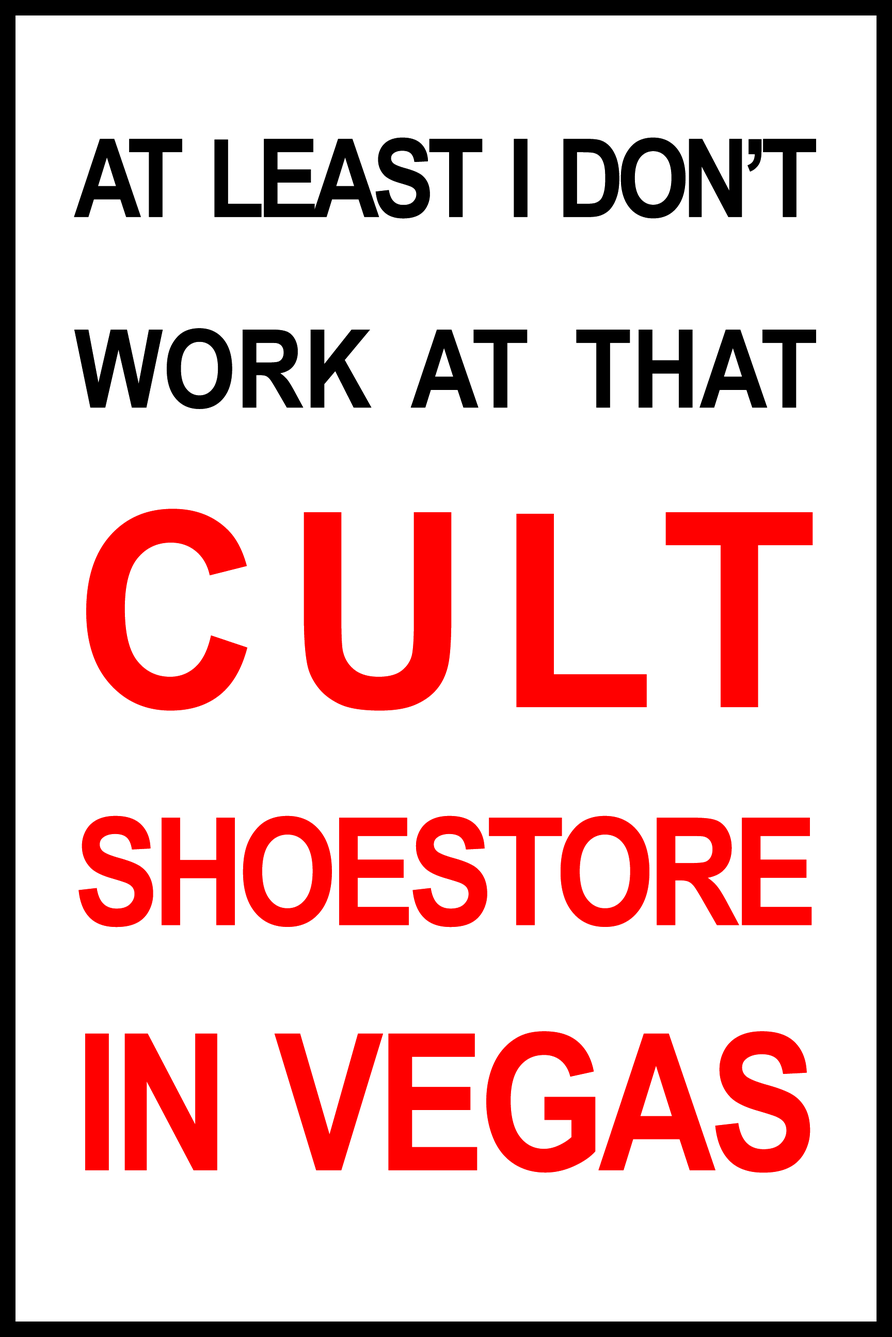
<style>
.page{position:relative;width:892px;height:1337px;background:#ffffff}
.page>*{position:absolute;margin:0}
.t1{font:109px/190.7px "Arial-BoldMT";letter-spacing:-0.075em;color:#000000;text-transform:uppercase;scale:0.85 1}
.t2{font:109px/190.7px "Arial-BoldMT";color:#000000;text-transform:uppercase;scale:0.86 1}
.t3{font:272.4px/299.7px "Arial-BoldMT";letter-spacing:0.05em;color:#ff0000;text-transform:uppercase;scale:0.95 1}
.t4{font:149.8px/217.9px "Arial-BoldMT";letter-spacing:-0.075em;color:#ff0000;text-transform:uppercase;scale:0.85 1}
.t5{font:190.7px/245.2px "Arial-BoldMT";letter-spacing:-0.04em;color:#ff0000;text-transform:uppercase;scale:0.85 1}
</style>
<div class="page">
<p class="t1" style="left:74px;top:137px;width:742px;height:1036px;text-align:justify">At least I Don’t<br><span class="t2">Work at That<br></span><span class="t3">CULT<br></span><span class="t4">SHOESTORE<br></span><span class="t5">in vegas</span></p>
<p class="t1" style="left:74px;top:137px;width:742px;height:1036px;text-align:justify">At least I Don’t<br><span class="t2">Work at That<br></span><span class="t3">CULT<br></span><span class="t4">SHOESTORE<br></span><span class="t5">in vegas</span></p>
</div>
